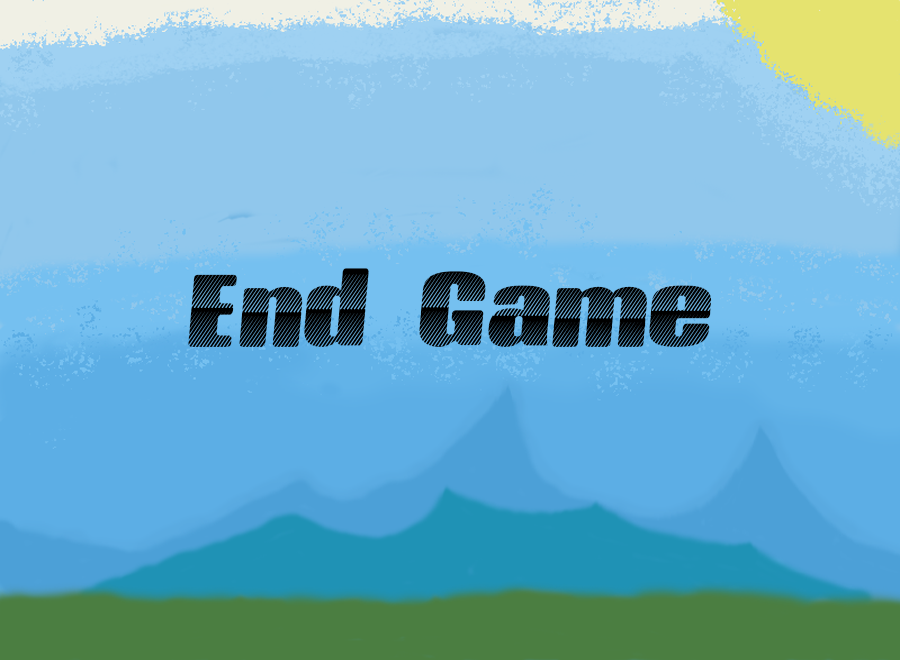
<style>
.page{position:relative;width:900px;height:660px;background:#90c7ec}
.page>*{position:absolute;margin:0}
.t1{font:145.8px "KingsCastle";color:#000000}
</style>
<div class="page">
<p class="t1" style="left:188px;top:268px;width:524px;height:79px">End Game</p>
</div>
